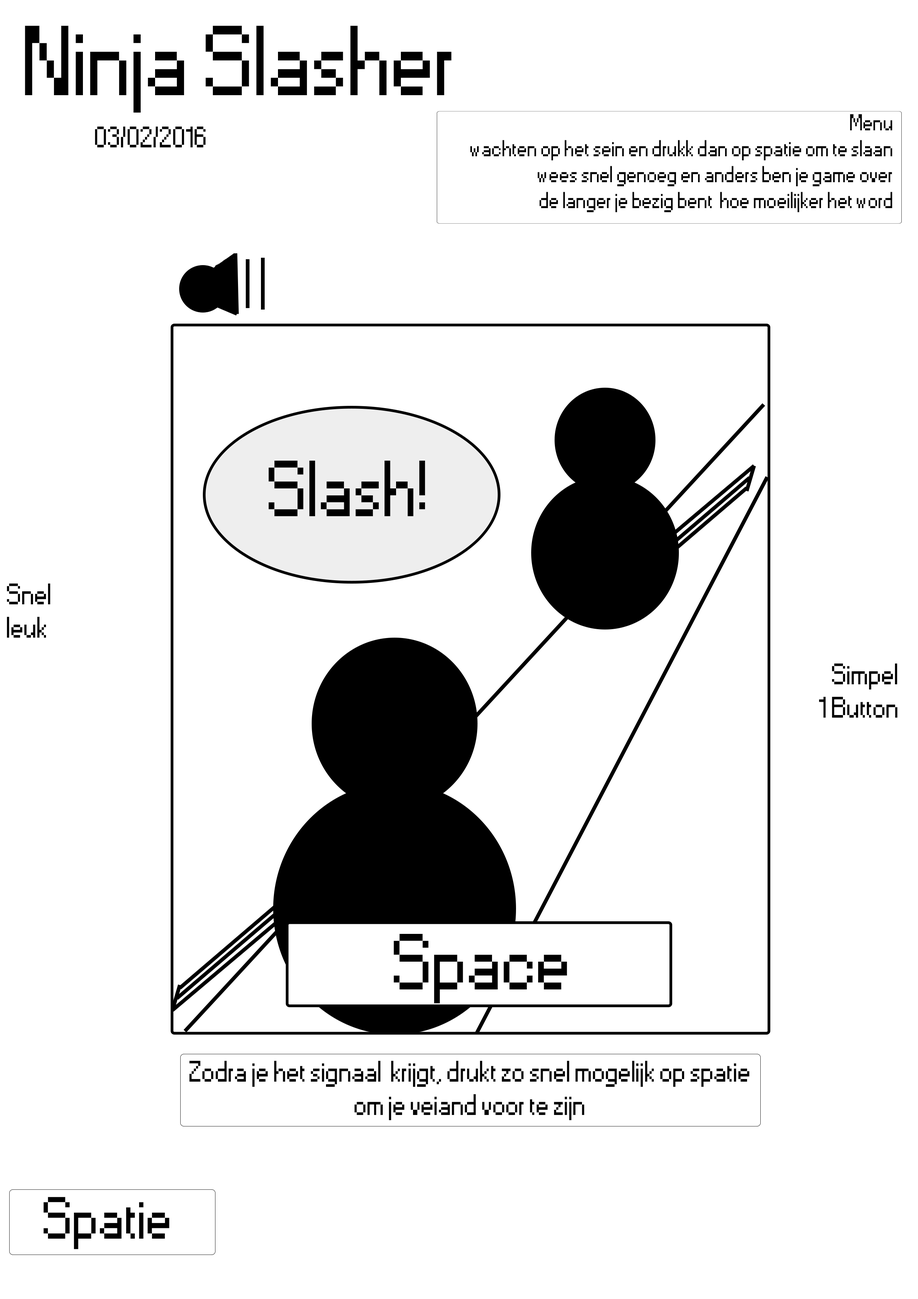
<style>
.page{position:relative;width:918px;height:1299px;background:#ffffff}
.page>*{position:absolute;margin:0}
.t1{font:92.6px "Small Fonts";color:#000000}
.t2{font:21.6px "Small Fonts";color:#000000}
.t3{font:27.8px "Small Fonts";color:#000000}
.t4{font:74px "Small Fonts";color:#000000}
.t5{font:55.5px "Small Fonts";color:#000000}
</style>
<div class="page">
<p class="t1" style="left:25px;top:26px;width:427px;height:87px">Ninja Slasher</p>
<p class="t2" style="left:470px;top:114px;width:423px;height:98px;text-align:right">Menu<br>wachten op het sein en drukk dan op spatie om te slaan<br>wees snel genoeg en anders ben je game over<br>de langer je bezig bent  hoe moeilijker het word</p>
<p class="t3" style="left:95px;top:126px;width:111px;height:21px">03/02/2016</p>
<p class="t4" style="left:268px;top:461px;width:157px;height:55px">Slash!</p>
<p class="t3" style="left:7px;top:583px;width:43px;height:55px">Snel<br>leuk</p>
<p class="t3" style="left:819px;top:663px;width:79px;height:54px;text-align:right">Simpel<br>1 Button</p>
<p class="t4" style="left:394px;top:934px;width:173px;height:69px">Space</p>
<p class="t3" style="left:189px;top:1060px;width:561px;height:60px;text-align:center">Zodra je het signaal  krijgt, drukt zo snel mogelijk op spatie<br>om je veiand voor te zijn</p>
<p class="t5" style="left:43px;top:1197px;width:127px;height:52px">Spatie</p>
</div>
